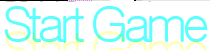
<style>
.page{position:relative;width:210px;height:50px;background:#ffffff}
.page>*{position:absolute;margin:0}
.t1{font:50px "Gulim";letter-spacing:-0.12em;color:#5cffff}
</style>
<div class="page">
<p class="t1" style="left:4px;top:6px;width:204px;height:37px">Start Game</p>
</div>
